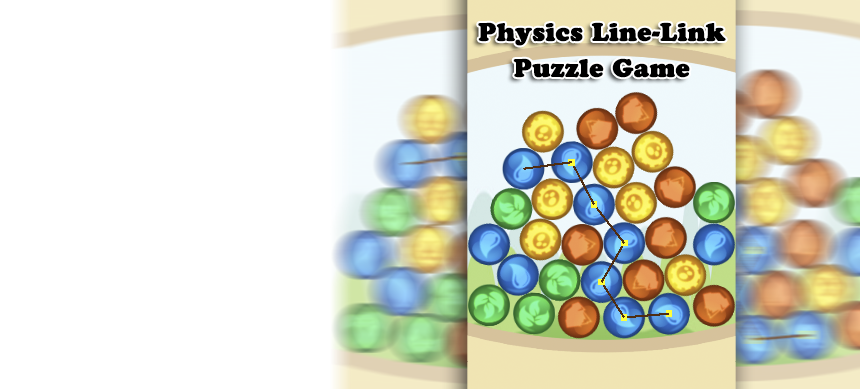
<style>
.page{position:relative;width:860px;height:389px;background:#ffffff}
.page>*{position:absolute;margin:0}
.t1{font:25px/36px "CooperBlackStd";color:#000000;font-weight:bold}
</style>
<div class="page">
<p class="t1" style="left:478px;top:22px;width:248px;height:56px;text-align:center">Physics Line-Link<br>Puzzle Game</p>
</div>
